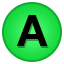
<style>
.page{position:relative;width:64px;height:64px;background:#ffffff}
.page>*{position:absolute;margin:0}
.t1{font:10.5px "HelveticaNeue-Bold";color:#000000}
</style>
<div class="page">
<p class="t1" style="left:16px;top:15px;width:32px;height:31px">A</p>
</div>
